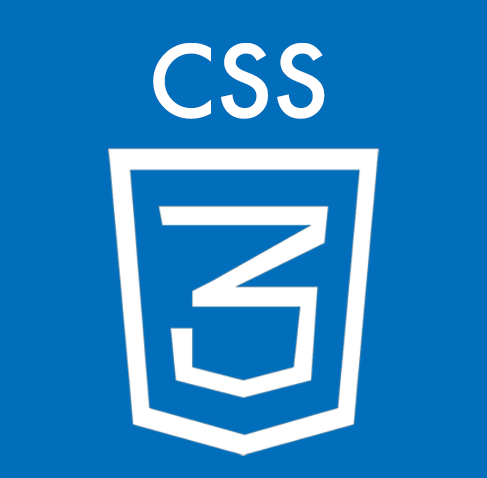
<style>
.page{position:relative;width:487px;height:478px;background:#006eba}
.page>*{position:absolute;margin:0}
.t1{font:96.5px "Futura-Medium";color:#ffffff}
</style>
<div class="page">
<p class="t1" style="left:153px;top:43px;width:172px;height:76px">CSS</p>
</div>
